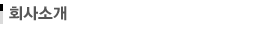
<style>
.page{position:relative;width:265px;height:30px;background:#ffffff}
.page>*{position:absolute;margin:0}
.t1{font:16px "YDIYGO350";color:#575757}
</style>
<div class="page">
<p class="t1" style="left:9px;top:6px;width:58px;height:15px">회사소개</p>
</div>
